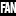
<style>
.page{position:relative;width:16px;height:16px;background:#000000}
.page>*{position:absolute;margin:0}
.t1{font:12px "Bebas";letter-spacing:-0.075em;color:#ffffff}
</style>
<div class="page">
<p class="t1" style="left:0px;top:2px;width:17px;height:11px">FAN</p>
</div>
